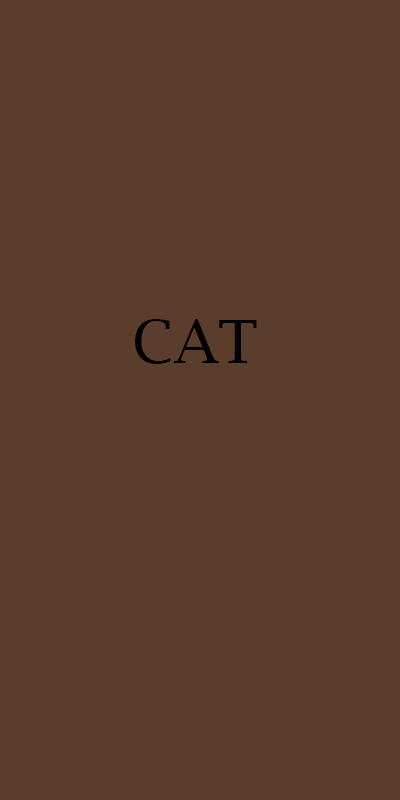
<style>
.page{position:relative;width:400px;height:800px;background:#5a3e2b}
.page>*{position:absolute;margin:0}
.t1{font:60px "LucidaBright";color:#000000}
</style>
<div class="page">
<p class="t1" style="left:135px;top:319px;width:122px;height:45px">CAT</p>
</div>
